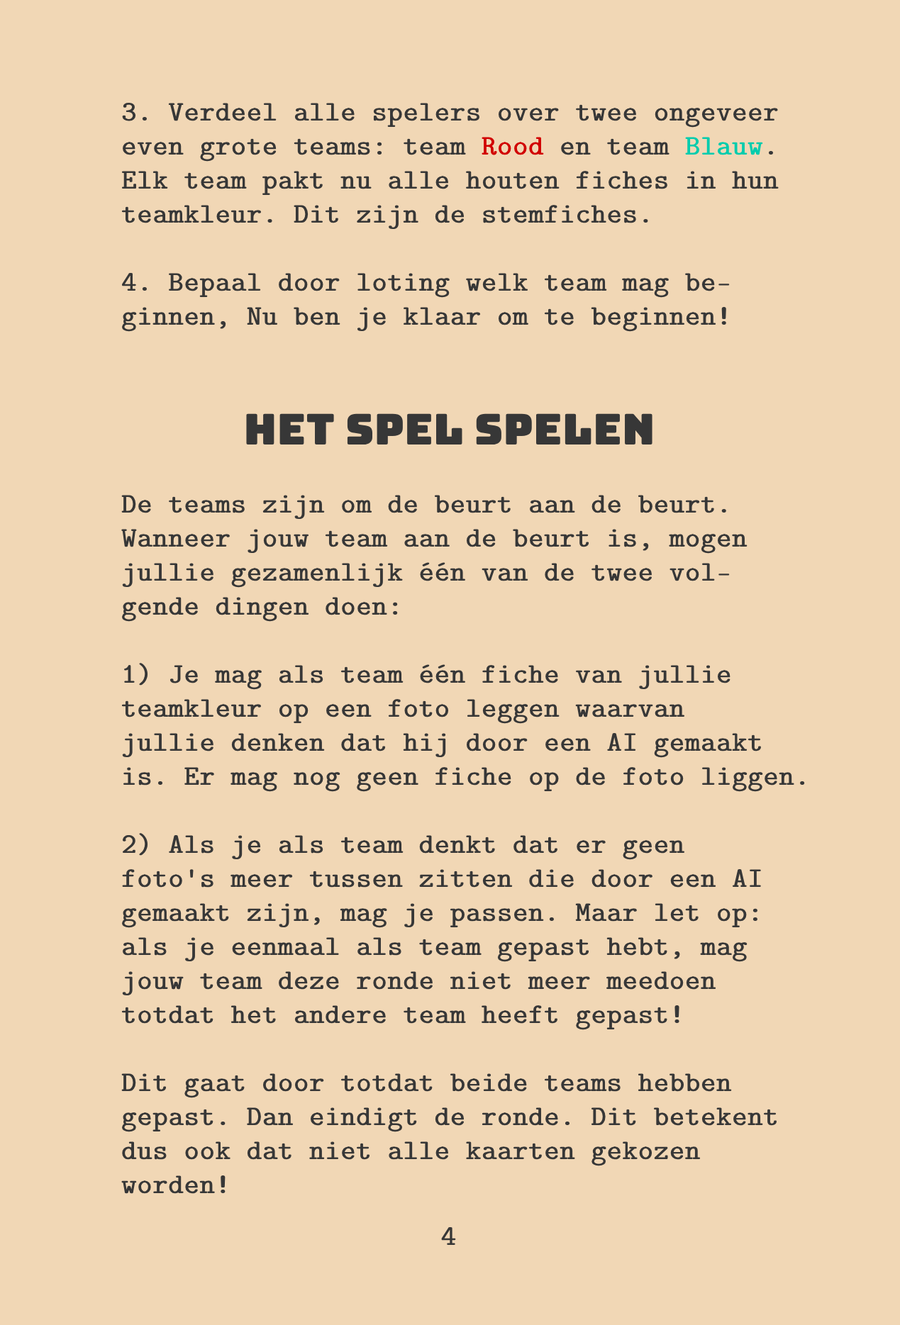
<style>
.page{position:relative;width:900px;height:1325px;background:#f1d7b5}
.page>*{position:absolute;margin:0}
.t1{font:28.4px "CMUTypewriter-Regular";color:#373737;font-weight:bold}
.t2{font:28.4px "CMUTypewriter-Regular";color:#d10000;font-weight:bold}
.t3{font:28.4px "CMUTypewriter-Regular";color:#00ccad;font-weight:bold}
.t4{font:42.5px "Bungee-Regular";color:#373737;font-weight:bold}
</style>
<div class="page">
<p class="t1" style="left:121px;top:103px;width:658px;height:229px">3. Verdeel alle spelers over twee ongeveer<br>even grote teams: team <span class="t2">Rood </span>en team <span class="t3">Blauw</span>. <br>Elk team pakt nu alle houten fiches in hun <br>teamkleur. Dit zijn de stemfiches.<br><br>4. Bepaal door loting welk team mag be-<br>ginnen, Nu ben je klaar om te beginnen!</p>
<p class="t4" style="left:246px;top:413px;width:406px;height:32px">Het spel spelen</p>
<p class="t1" style="left:121px;top:495px;width:684px;height:699px">De teams zijn om de beurt aan de beurt. <br>Wanneer jouw team aan de beurt is, mogen <br>jullie gezamenlijk één van de twee vol-<br>gende dingen doen:<br><br>1) Je mag als team één fiche van jullie <br>teamkleur op een foto leggen waarvan<br>jullie denken dat hij door een AI gemaakt <br>is. Er mag nog geen fiche op de foto liggen.<br><br>2) Als je als team denkt dat er geen <br>foto's meer tussen zitten die door een AI <br>gemaakt zijn, mag je passen. Maar let op:<br>als je eenmaal als team gepast hebt, mag<br>jouw team deze ronde niet meer meedoen <br>totdat het andere team heeft gepast!<br><br>Dit gaat door totdat beide teams hebben <br>gepast. Dan eindigt de ronde. Dit betekent <br>dus ook dat niet alle kaarten gekozen<br>worden!</p>
<p class="t1" style="left:441px;top:1227px;width:15px;height:18px">4</p>
</div>
